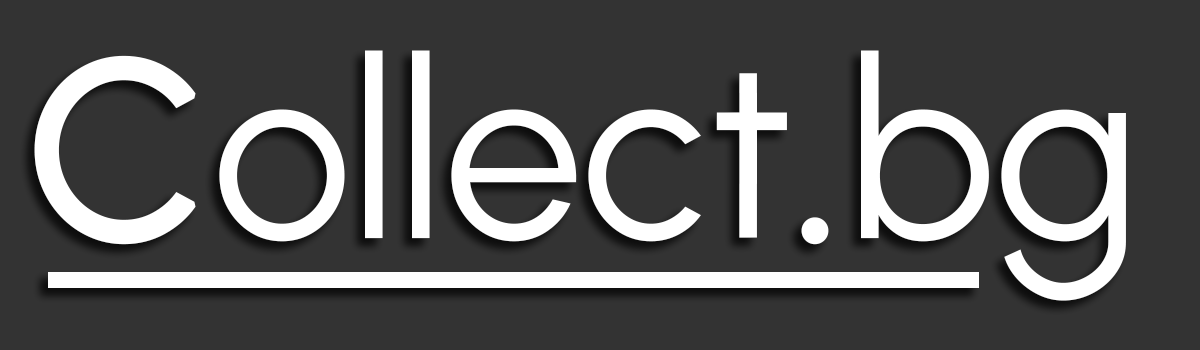
<style>
.page{position:relative;width:1200px;height:350px;background:#333333}
.page>*{position:absolute;margin:0}
.t1{font:250px "Urbanist-Regular";color:#ffffff}
.t2{font:250px "Urbanist-Regular";color:#ffffff;font-weight:bold}
</style>
<div class="page">
<p class="t1" style="left:34px;top:50px;width:1092px;height:251px"><span class="t2">C</span>ollect<span class="t2">.</span>bg</p>
</div>
